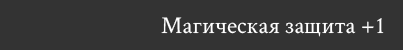
<style>
.page{position:relative;width:403px;height:50px;background:#333333}
.page>*{position:absolute;margin:0}
.t1{font:24px "CrimsonText-Regular";color:#ffffff}
</style>
<div class="page">
<p class="t1" style="left:161px;top:17px;width:223px;height:20px">Магическая защита +1</p>
</div>
